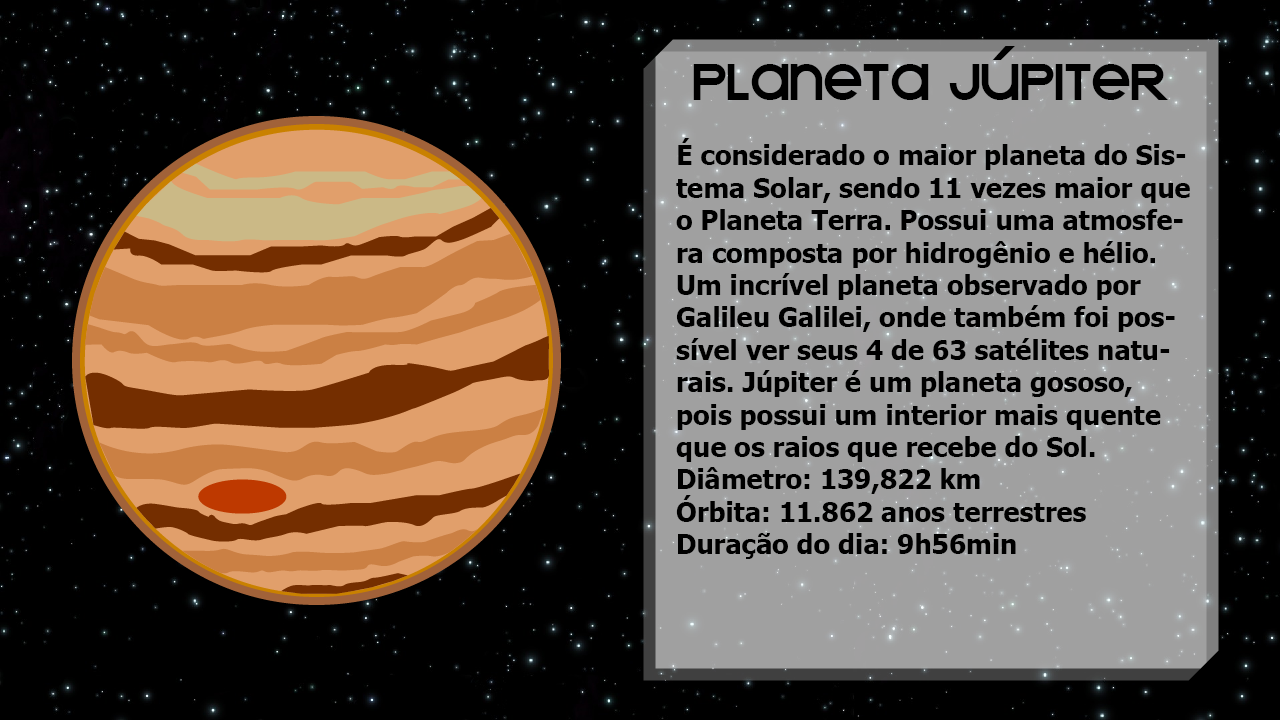
<style>
.page{position:relative;width:1280px;height:720px;background:#000000}
.page>*{position:absolute;margin:0}
.t1{font:58px "KravitzExtraThermal";color:#000000}
.t2{font:27px "Tahoma-Bold";color:#000000}
</style>
<div class="page">
<p class="t1" style="left:693px;top:46px;width:475px;height:54px">PLANETA JÚPITER</p>
<p class="t2" style="left:676px;top:138px;width:514px;height:421px">É considerado o maior planeta do Sistema Solar, sendo 11 vezes maior que o Planeta Terra. Possui uma atmosfera composta por hidrogênio e hélio. Um incrível planeta observado por Galileu Galilei, onde também foi possível ver seus 4 de 63 satélites naturais. Júpiter é um planeta gososo, pois possui um interior mais quente que os raios que recebe do Sol.<br>Diâmetro: 139,822 km<br>Órbita: 11.862 anos terrestres<br>Duração do dia: 9h56min</p>
</div>
